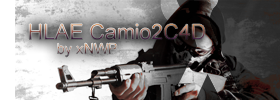
<style>
.page{position:relative;width:280px;height:100px}
.page>*{position:absolute;margin:0}
.t1{font:21.4px "ArialMT"}
</style>
<div class="page">
<p class="t1" style="left:29px;top:23px;width:176px;height:17px">HLAE Camio2C4D</p>
</div>
